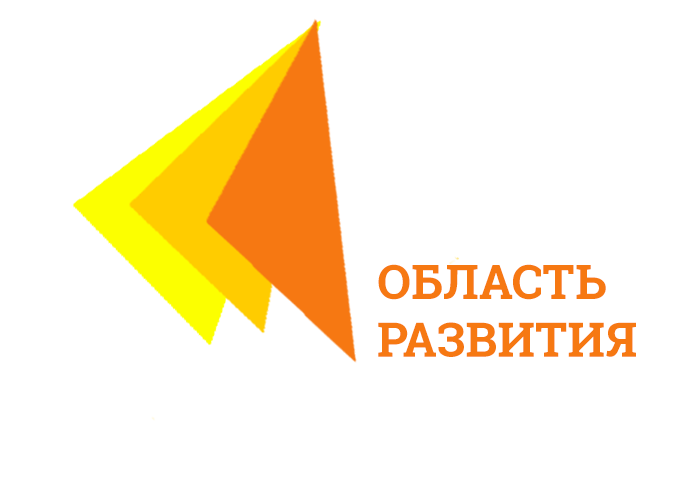
<style>
.page{position:relative;width:700px;height:500px;background:#ffffff}
.page>*{position:absolute;margin:0}
.t1{font:48px "RobotoSlab-Bold";color:#f67812}
</style>
<div class="page">
<p class="t1" style="left:378px;top:264px;width:258px;height:93px">ОБЛАСТЬ <br>РАЗВИТИЯ</p>
</div>
